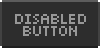
<style>
.page{position:relative;width:100px;height:48px;background:#2d2d2d}
.page>*{position:absolute;margin:0}
.t1{font:10px "Pixel";letter-spacing:0.005em;color:#979797}
.t2{font:10px "Pixel";letter-spacing:0.005em}
</style>
<div class="page">
<p class="t1" style="left:15px;top:14px;width:71px;height:22px;text-align:center">disabled<br>button</p>
<p class="t2" style="left:17px;top:14px;width:66px;height:22px;text-align:center">hovered<br>button</p>
<p class="t1" style="left:23px;top:14px;width:54px;height:22px;text-align:center">idle<br>button</p>
</div>
